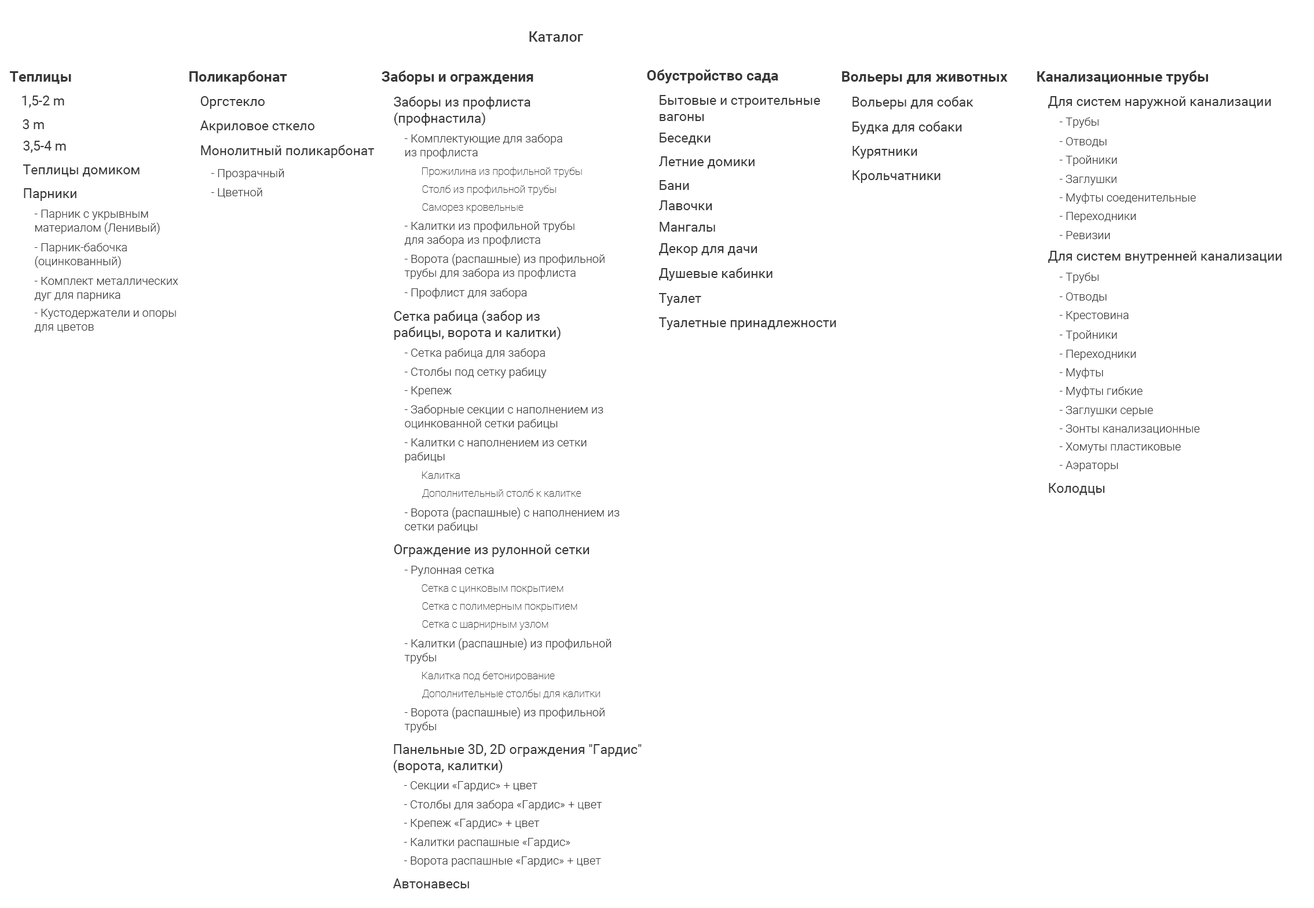
<style>
.page{position:relative;width:1314px;height:908px;background:#ffffff}
.page>*{position:absolute;margin:0}
.t1{font:14.5px "Roboto-Medium";color:#373737}
.t2{font:14.5px "Roboto-Bold";color:#373737}
.t3{font:13.3px "Roboto-Regular";color:#373737}
.t4{font:11.6px "Roboto-Light";color:#373737}
.t5{font:10.4px "Roboto-Thin";color:#373737}
</style>
<div class="page">
<p class="t1" style="left:529px;top:31px;width:54px;height:11px">Каталог</p>
<p class="t2" style="left:10px;top:71px;width:61px;height:13px">Теплицы</p>
<p class="t2" style="left:189px;top:71px;width:98px;height:14px">Поликарбонат</p>
<p class="t2" style="left:382px;top:71px;width:151px;height:14px">Заборы и ограждения</p>
<p class="t2" style="left:647px;top:69px;width:131px;height:14px">Обустройство сада</p>
<p class="t2" style="left:842px;top:71px;width:165px;height:14px">Вольеры для животных</p>
<p class="t2" style="left:1037px;top:71px;width:171px;height:14px">Канализационные трубы</p>
<p class="t3" style="left:22px;top:96px;width:42px;height:12px">1,5-2 m</p>
<p class="t3" style="left:200px;top:96px;width:65px;height:13px">Оргстекло</p>
<p class="t3" style="left:394px;top:96px;width:136px;height:30px">Заборы из профлиста<br>(профнастила)</p>
<p class="t3" style="left:659px;top:95px;width:161px;height:26px">Бытовые и строительные<br>вагоны</p>
<p class="t3" style="left:852px;top:96px;width:121px;height:13px">Вольеры для собак</p>
<p class="t3" style="left:1048px;top:96px;width:223px;height:13px">Для систем наружной канализации</p>
<p class="t3" style="left:23px;top:119px;width:21px;height:10px">3 m</p>
<p class="t3" style="left:200px;top:120px;width:114px;height:13px">Акриловое сткело</p>
<p class="t3" style="left:852px;top:121px;width:110px;height:13px">Будка для собаки</p>
<p class="t4" style="left:1059px;top:117px;width:39px;height:11px">- Трубы</p>
<p class="t4" style="left:404px;top:134px;width:158px;height:25px">- Комплектующие для забора <br>из профлиста</p>
<p class="t3" style="left:659px;top:133px;width:51px;height:12px">Беседки</p>
<p class="t4" style="left:1059px;top:137px;width:47px;height:10px">- Отводы</p>
<p class="t3" style="left:23px;top:141px;width:43px;height:12px">3,5-4 m</p>
<p class="t3" style="left:201px;top:145px;width:173px;height:13px">Монолитный поликарбонат</p>
<p class="t3" style="left:852px;top:146px;width:65px;height:13px">Курятники</p>
<p class="t3" style="left:658px;top:156px;width:96px;height:12px">Летние домики</p>
<p class="t4" style="left:1059px;top:155px;width:58px;height:11px">- Тройники</p>
<p class="t3" style="left:23px;top:164px;width:117px;height:13px">Теплицы домиком</p>
<p class="t4" style="left:211px;top:168px;width:73px;height:11px">- Прозрачный</p>
<p class="t5" style="left:422px;top:167px;width:160px;height:10px">Прожилина из профильной трубы</p>
<p class="t3" style="left:852px;top:170px;width:88px;height:13px">Крольчатники</p>
<p class="t5" style="left:422px;top:185px;width:134px;height:10px">Столб из профильной трубы</p>
<p class="t3" style="left:659px;top:180px;width:30px;height:10px">Бани</p>
<p class="t4" style="left:1059px;top:175px;width:57px;height:10px">- Заглушки</p>
<p class="t3" style="left:24px;top:188px;width:52px;height:13px">Парники</p>
<p class="t4" style="left:211px;top:188px;width:51px;height:10px">- Цветной</p>
<p class="t4" style="left:1059px;top:193px;width:136px;height:11px">- Муфты соеденительные</p>
<p class="t4" style="left:34px;top:210px;width:126px;height:24px">- Парник с укрывным<br>материалом (Ленивый)</p>
<p class="t5" style="left:422px;top:203px;width:101px;height:10px">Саморез кровельные</p>
<p class="t3" style="left:658px;top:200px;width:54px;height:10px">Лавочки</p>
<p class="t4" style="left:404px;top:221px;width:170px;height:25px">- Калитки из профильной трубы<br>для забора из профлиста</p>
<p class="t3" style="left:659px;top:222px;width:56px;height:10px">Мангалы</p>
<p class="t4" style="left:1059px;top:212px;width:76px;height:10px">- Переходники</p>
<p class="t4" style="left:1059px;top:231px;width:51px;height:8px">- Ревизии</p>
<p class="t4" style="left:34px;top:243px;width:93px;height:25px">- Парник-бабочка<br>(оцинкованный)</p>
<p class="t3" style="left:659px;top:243px;width:98px;height:13px">Декор для дачи</p>
<p class="t4" style="left:404px;top:254px;width:200px;height:25px">- Ворота (распашные) из профильной<br>трубы для забора из профлиста</p>
<p class="t3" style="left:1048px;top:251px;width:233px;height:12px">Для систем внутренней канализации</p>
<p class="t3" style="left:659px;top:267px;width:113px;height:14px">Душевые кабинки</p>
<p class="t4" style="left:34px;top:277px;width:144px;height:24px">- Комплект металлических<br>дуг для парника</p>
<p class="t4" style="left:1059px;top:272px;width:39px;height:11px">- Трубы</p>
<p class="t4" style="left:404px;top:288px;width:123px;height:11px">- Профлист для забора</p>
<p class="t3" style="left:658px;top:293px;width:43px;height:13px">Туалет</p>
<p class="t4" style="left:1059px;top:292px;width:47px;height:10px">- Отводы</p>
<p class="t4" style="left:34px;top:309px;width:142px;height:23px">- Кустодержатели и опоры<br>для цветов</p>
<p class="t3" style="left:394px;top:310px;width:166px;height:30px">Сетка рабица (забор из<br>рабицы, ворота и калитки)</p>
<p class="t3" style="left:658px;top:317px;width:178px;height:13px">Туалетные принадлежности</p>
<p class="t4" style="left:1059px;top:311px;width:69px;height:10px">- Крестовина</p>
<p class="t4" style="left:1059px;top:330px;width:58px;height:11px">- Тройники</p>
<p class="t4" style="left:404px;top:348px;width:141px;height:11px">- Сетка рабица для забора</p>
<p class="t4" style="left:1059px;top:350px;width:76px;height:10px">- Переходники</p>
<p class="t4" style="left:404px;top:367px;width:143px;height:11px">- Столбы под сетку рабицу</p>
<p class="t4" style="left:1059px;top:368px;width:44px;height:11px">- Муфты</p>
<p class="t4" style="left:404px;top:386px;width:48px;height:11px">- Крепеж</p>
<p class="t4" style="left:1059px;top:386px;width:83px;height:11px">- Муфты гибкие</p>
<p class="t4" style="left:404px;top:405px;width:199px;height:25px">- Заборные секции с наполнением из<br>оцинкованной сетки рабицы</p>
<p class="t4" style="left:1059px;top:406px;width:94px;height:10px">- Заглушки серые</p>
<p class="t4" style="left:1059px;top:424px;width:141px;height:10px">- Зонты канализационные</p>
<p class="t4" style="left:404px;top:438px;width:182px;height:25px">- Калитки с наполнением из сетки <br>рабицы</p>
<p class="t4" style="left:1059px;top:442px;width:121px;height:11px">- Хомуты пластиковые</p>
<p class="t4" style="left:1059px;top:461px;width:59px;height:10px">- Аэраторы</p>
<p class="t5" style="left:422px;top:471px;width:38px;height:8px">Калитка</p>
<p class="t3" style="left:1048px;top:483px;width:57px;height:12px">Колодцы</p>
<p class="t5" style="left:422px;top:489px;width:159px;height:9px">Дополнительный столб к калитке</p>
<p class="t4" style="left:404px;top:507px;width:215px;height:26px">- Ворота (распашные) с наполнением из<br>сетки рабицы</p>
<p class="t3" style="left:394px;top:544px;width:195px;height:13px">Ограждение из рулонной сетки</p>
<p class="t4" style="left:404px;top:566px;width:90px;height:10px">- Рулонная сетка</p>
<p class="t5" style="left:421px;top:584px;width:142px;height:10px">Сетка с цинковым покрытием</p>
<p class="t5" style="left:422px;top:602px;width:155px;height:10px">Сетка с полимерным покрытием</p>
<p class="t5" style="left:422px;top:620px;width:126px;height:10px">Сетка с шарнирным узлом</p>
<p class="t4" style="left:404px;top:638px;width:207px;height:25px">- Калитки (распашные) из профильной<br>трубы</p>
<p class="t5" style="left:422px;top:671px;width:133px;height:10px">Калитка под бетонирование</p>
<p class="t5" style="left:422px;top:689px;width:178px;height:10px">Дополнительные столбы для калитки</p>
<p class="t4" style="left:404px;top:707px;width:200px;height:25px">- Ворота (распашные) из профильной<br>трубы</p>
<p class="t3" style="left:393px;top:744px;width:248px;height:29px">Панельные 3D, 2D ограждения "Гардис" <br>(ворота, калитки)</p>
<p class="t4" style="left:404px;top:781px;width:133px;height:10px">- Секции «Гардис» + цвет</p>
<p class="t4" style="left:404px;top:800px;width:198px;height:11px">- Столбы для забора «Гардис» + цвет</p>
<p class="t4" style="left:404px;top:819px;width:136px;height:10px">- Крепеж «Гардис» + цвет</p>
<p class="t4" style="left:404px;top:838px;width:166px;height:10px">- Калитки распашные «Гардис»</p>
<p class="t4" style="left:404px;top:856px;width:197px;height:11px">- Ворота распашные «Гардис» + цвет</p>
<p class="t3" style="left:393px;top:878px;width:76px;height:10px">Автонавесы</p>
</div>
